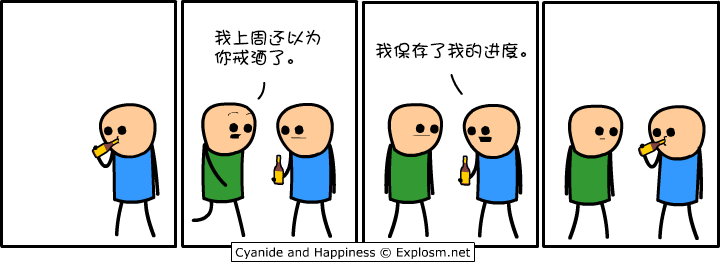
<style>
.page{position:relative;width:721px;height:262px;background:#ffffff}
.page>*{position:absolute;margin:0}
.t1{font:18px/20px "DFPShaoNvW5";color:#000000}
.t2{font:18px "DFPShaoNvW5";color:#000000}
</style>
<div class="page">
<p class="t1" style="left:214px;top:29px;width:107px;height:37px">我上周还以为<br>你戒酒了。</p>
<p class="t2" style="left:375px;top:42px;width:152px;height:17px">我保存了我的进度。</p>
</div>
